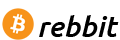
<style>
.page{position:relative;width:120px;height:40px;background:#ffffff}
.page>*{position:absolute;margin:0}
.t1{font:29px "Ubuntu-MediumItalic";color:#000000}
</style>
<div class="page">
<p class="t1" style="left:39px;top:15px;width:80px;height:22px">rebbit</p>
</div>
